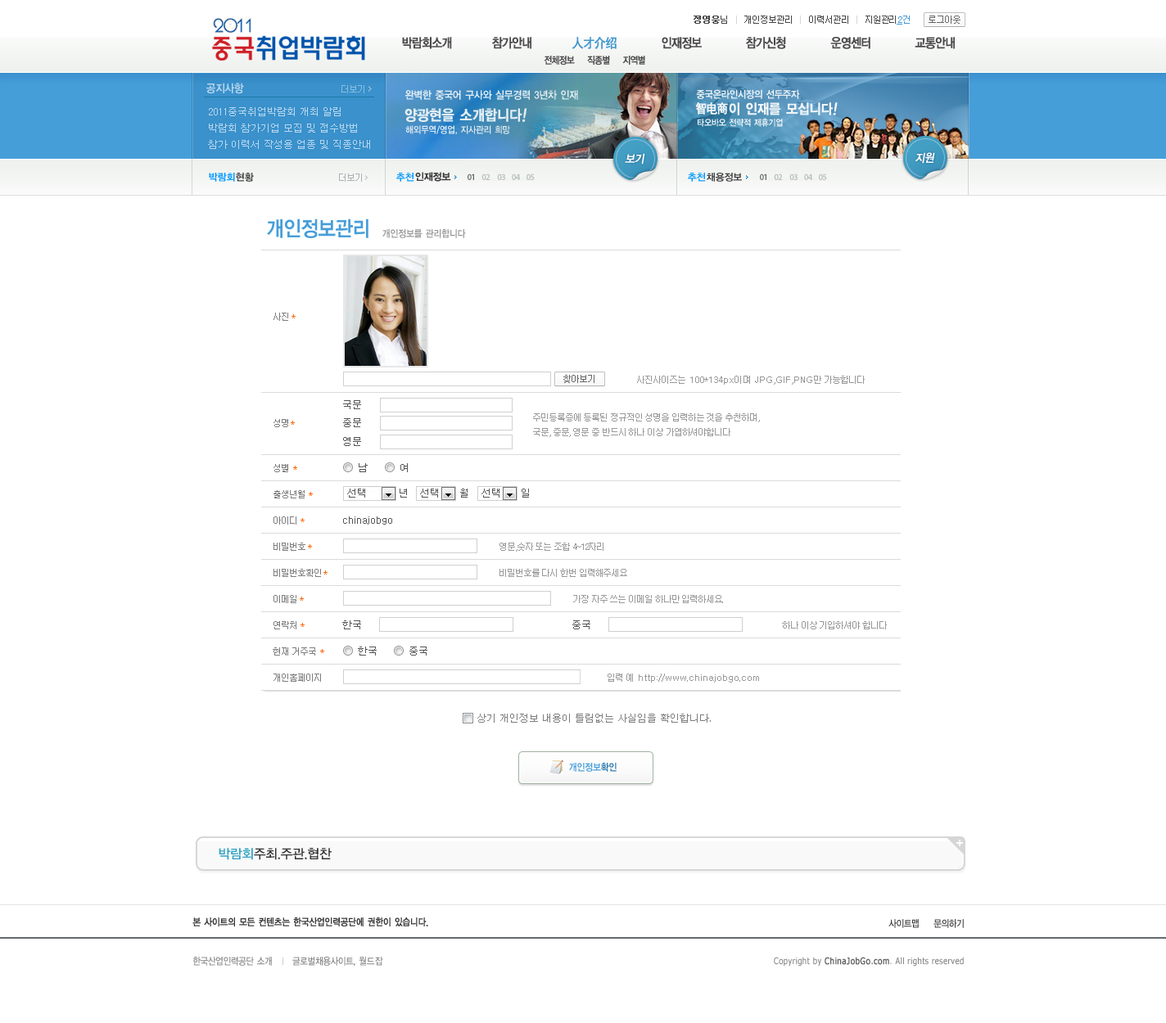
<style>
.page{position:relative;width:1166px;height:1023px;background:#ffffff}
.page>*{position:absolute;margin:0}
.t1{font:9px "Dotum";letter-spacing:-0.1em;color:#464646}
.t2{font:9px "Dotum";letter-spacing:-0.1em;color:#464646;font-weight:bold}
.t3{font:9px "Dotum";letter-spacing:-0.1em;color:#d6d6d6}
.t4{font:9px "Dotum";color:#4298d5;text-decoration:underline}
.t5{font:9px "Dotum";color:#4298d5}
.t6{font:13.1px "YDIYGO130-KSCpc-EUC-H";letter-spacing:-0.14em;color:#4a4a4a;font-weight:bold;scale:0.86 1}
.t7{font:13.1px "SimHei";letter-spacing:-0.08em;color:#3e95cf;font-weight:bold;scale:0.9 1}
.t8{font:9.8px "YDIYGO130-KSCpc-EUC-H";letter-spacing:-0.14em;color:#4a4a4a;font-weight:bold;scale:0.86 1}
.t9{font:11.5px "YDIYGO140-KSCpc-EUC-H";letter-spacing:-0.1em;color:#b9d7ef;scale:0.9 1}
.t10{font:10.2px "YDIYGO140-KSCpc-EUC-H";letter-spacing:-0.1em;color:#f0f5f8;scale:0.9 1}
.t11{font:10.8px "YDIYGO140-KSCpc-EUC-H";letter-spacing:-0.1em;color:#e4eef4;scale:0.9 1}
.t12{font:9.8px/16.4px "Dotum";color:#b9d7ef}
.t13{font:14.8px "YDIYGO140-KSCpc-EUC-H";letter-spacing:-0.1em;color:#e4eef4;font-weight:bold;scale:0.9 1}
.t14{font:14.8px "YDIYGO140-KSCpc-EUC-H";letter-spacing:-0.1em;color:#e4eef4;font-weight:bold;font-style:italic;scale:0.9 1}
.t15{font:12.7px "SimHei";letter-spacing:-0.1em;color:#f0f5f8;font-weight:bold;scale:0.9 1}
.t16{font:14px "YDIYGO140-KSCpc-EUC-H";letter-spacing:-0.1em;color:#f0f5f8;font-weight:bold;scale:0.9 1}
.t17{font:14px "YDIYGO140-KSCpc-EUC-H";letter-spacing:-0.1em;color:#f0f5f8;font-weight:bold;font-style:italic;scale:0.9 1}
.t18{font:9.4px "YDIYGO140-KSCpc-EUC-H";letter-spacing:-0.1em;color:#dde8ef;scale:0.9 1}
.t19{font:8.9px "YDIYGO140-KSCpc-EUC-H";letter-spacing:-0.1em;color:#f0f5f8;scale:0.9 1}
.t20{font:11.5px "YDIYGO130-KSCpc-EUC-H";letter-spacing:-0.1em;color:#ffffff;font-weight:bold;font-style:italic;scale:0.9 1}
.t21{font:9.8px "YDIYGO140-KSCpc-EUC-H";letter-spacing:-0.1em;color:#0099ff}
.t22{font:9.8px "YDIYGO140-KSCpc-EUC-H";letter-spacing:-0.1em;color:#3e3e3e}
.t23{font:21.3px "YDIYGO140-KSCpc-EUC-H";letter-spacing:-0.1em;color:#469ed9;scale:0.9 1}
.t24{font:9.8px "YDIYGO140-KSCpc-EUC-H";letter-spacing:-0.1em;color:#999999;scale:0.9 1}
.t25{font:9px "Dotum";letter-spacing:-0.1em;color:#7d7d7d}
.t26{font:9px "Dotum";letter-spacing:-0.1em;color:#ff6600}
.t27{font:9px "Dotum";color:#999999}
.t28{font:9px "Dotum";letter-spacing:-0.1em;color:#999999}
.t29{font:9.8px "Dotum";color:#555555}
.t30{font:9px/14.7px "Dotum";letter-spacing:-0.1em;color:#999999}
.t31{font:9.8px "Dotum";color:#7d7d7d}
.t32{font:9.8px "YDIYGO140-KSCpc-EUC-H";letter-spacing:-0.1em;color:#469ed9;scale:0.9 1}
.t33{font:9.8px "YDIYGO140-KSCpc-EUC-H";letter-spacing:-0.1em;color:#2677ae;scale:0.9 1}
.t34{font:13.1px "YDIYGO130-KSCpc-EUC-H";letter-spacing:-0.1em;color:#323131}
.t35{font:13.1px "YDIYGO130-KSCpc-EUC-H";letter-spacing:-0.1em;color:#2ea2c2}
.t36{font:9.8px "YDIYGO130-KSCpc-EUC-H";letter-spacing:-0.1em;color:#373737;font-weight:bold;scale:0.86 1}
.t37{font:9.8px "YDIYGO130-KSCpc-EUC-H";letter-spacing:-0.1em;color:#373737;scale:0.86 1}
.t38{font:9.8px "YDIYGO130-KSCpc-EUC-H";letter-spacing:-0.1em;color:#868686;scale:0.86 1}
.t39{font:9.8px "YDIYGO130-KSCpc-EUC-H";letter-spacing:-0.05em;color:#868686;scale:0.86 1}
.t40{font:9px "Tahoma";letter-spacing:0.05em;color:#868686;scale:0.86 1}
.t41{font:9px "Tahoma";letter-spacing:0.05em;color:#626262;font-weight:bold;scale:0.86 1}
</style>
<div class="page">
<p class="t1" style="left:693px;top:16px;width:267px;height:8px"><span class="t2">정영웅</span>님   <span class="t3">| </span>  개인정보관리   <span class="t3">| </span>  이력서관리   <span class="t3">|</span>   지원관리             로그아웃</p>
<p class="t4" style="left:896px;top:16px;width:13px;height:9px">2<span class="t5">건</span></p>
<p class="t6" style="left:402px;top:37px;width:50px;height:12px">박람회소개</p>
<p class="t6" style="left:492px;top:37px;width:39px;height:12px">참가안내</p>
<p class="t7" style="left:571px;top:37px;width:45px;height:12px">人才介绍</p>
<p class="t6" style="left:661px;top:37px;width:40px;height:12px">인재정보</p>
<p class="t6" style="left:746px;top:37px;width:40px;height:12px">참가신청</p>
<p class="t6" style="left:830px;top:37px;width:40px;height:12px">운영센터</p>
<p class="t6" style="left:914px;top:37px;width:40px;height:12px">교통안내</p>
<p class="t8" style="left:543px;top:56px;width:102px;height:9px">전체정보    직종별    지역별</p>
<p class="t9" style="left:206px;top:83px;width:38px;height:11px">공지사항</p>
<p class="t10" style="left:696px;top:89px;width:104px;height:10px">중국온라인시장의 선두주자</p>
<p class="t11" style="left:405px;top:90px;width:173px;height:10px">완벽한 중국어 구사와 실무경력 3년차 인재</p>
<p class="t12" style="left:208px;top:107px;width:162px;height:42px">2011중국취업박람회 개최 알림<br>박람회 참가기업 모집 및 접수방법<br>참가 이력서 작성용 업종 및 직종안내</p>
<p class="t13" style="left:404px;top:108px;width:123px;height:14px">양광현을 소개합니다<span class="t14">!</span></p>
<p class="t15" style="left:696px;top:102px;width:32px;height:13px">智电商</p>
<p class="t16" style="left:728px;top:102px;width:109px;height:13px">이 인재를 모십니다<span class="t17">!</span></p>
<p class="t18" style="left:405px;top:125px;width:105px;height:10px">해외무역/영업, 지사관리 희망</p>
<p class="t19" style="left:697px;top:118px;width:85px;height:9px">타오바오 전략적 제휴기업</p>
<p class="t20" style="left:624px;top:153px;width:21px;height:12px">보기</p>
<p class="t20" style="left:915px;top:152px;width:20px;height:12px">지원</p>
<p class="t21" style="left:209px;top:173px;width:26px;height:9px">박람회</p>
<p class="t22" style="left:236px;top:173px;width:18px;height:9px">현황</p>
<p class="t21" style="left:396px;top:173px;width:18px;height:9px">추천</p>
<p class="t22" style="left:415px;top:172px;width:36px;height:10px">인재정보</p>
<p class="t21" style="left:688px;top:173px;width:18px;height:9px">추천</p>
<p class="t22" style="left:706px;top:173px;width:36px;height:9px">채용정보</p>
<p class="t23" style="left:267px;top:219px;width:101px;height:19px">개인정보관리</p>
<p class="t24" style="left:382px;top:229px;width:84px;height:9px">개인정보를 관리합니다</p>
<p class="t25" style="left:273px;top:313px;width:15px;height:8px">사진</p>
<p class="t26" style="left:291px;top:314px;width:4px;height:4px">*</p>
<p class="t27" style="left:637px;top:376px;width:227px;height:9px"><span class="t28">사진사이즈는  </span>100*134px이며 JPG,GIF,PNG<span class="t28">만 가능합니다</span></p>
<p class="t29" style="left:343px;top:400px;width:18px;height:9px">국문</p>
<p class="t30" style="left:533px;top:413px;width:227px;height:24px">주민등록증에 등록된 정규적인 성명을 입력하는 것을 추천하며,<br>국문, 중문, 영문 중 반드시 하나 이상 가엽하셔야합니다</p>
<p class="t25" style="left:273px;top:419px;width:15px;height:8px">성명</p>
<p class="t26" style="left:291px;top:421px;width:4px;height:4px">*</p>
<p class="t29" style="left:343px;top:418px;width:18px;height:9px">중문</p>
<p class="t29" style="left:343px;top:437px;width:18px;height:9px">영문</p>
<p class="t25" style="left:273px;top:464px;width:15px;height:8px">성별</p>
<p class="t26" style="left:293px;top:466px;width:4px;height:4px">*</p>
<p class="t29" style="left:358px;top:463px;width:9px;height:9px">남</p>
<p class="t29" style="left:400px;top:463px;width:8px;height:9px">여</p>
<p class="t25" style="left:273px;top:490px;width:31px;height:8px">출생년월</p>
<p class="t26" style="left:309px;top:492px;width:4px;height:4px">*</p>
<p class="t29" style="left:347px;top:489px;width:18px;height:9px">선택</p>
<p class="t29" style="left:399px;top:489px;width:8px;height:9px">년</p>
<p class="t29" style="left:420px;top:489px;width:18px;height:9px">선택</p>
<p class="t29" style="left:460px;top:489px;width:7px;height:9px">월</p>
<p class="t29" style="left:481px;top:489px;width:18px;height:9px">선택</p>
<p class="t29" style="left:521px;top:489px;width:8px;height:9px">일</p>
<p class="t25" style="left:273px;top:516px;width:23px;height:9px">아이디</p>
<p class="t26" style="left:300px;top:518px;width:4px;height:4px">*</p>
<p class="t29" style="left:343px;top:516px;width:49px;height:9px">chinajobgo</p>
<p class="t25" style="left:273px;top:543px;width:32px;height:8px">비밀번호</p>
<p class="t26" style="left:308px;top:544px;width:4px;height:4px">*</p>
<p class="t28" style="left:499px;top:543px;width:104px;height:9px">영문,숫자 또는 조합 4~12자리</p>
<p class="t25" style="left:273px;top:569px;width:48px;height:8px">비밀번호확인</p>
<p class="t28" style="left:499px;top:569px;width:128px;height:8px">비밀번호를 다시 한번 입력해주세요</p>
<p class="t26" style="left:323px;top:570px;width:4px;height:5px">*</p>
<p class="t25" style="left:273px;top:595px;width:23px;height:8px">이메일</p>
<p class="t26" style="left:300px;top:597px;width:4px;height:4px">*</p>
<p class="t28" style="left:573px;top:595px;width:150px;height:8px">가장 자주 쓰는 이메일 하나만 입력하세요.</p>
<p class="t25" style="left:273px;top:621px;width:23px;height:8px">연락처</p>
<p class="t26" style="left:300px;top:623px;width:4px;height:4px">*</p>
<p class="t29" style="left:342px;top:620px;width:19px;height:9px">한국</p>
<p class="t29" style="left:572px;top:620px;width:18px;height:9px">중국</p>
<p class="t28" style="left:782px;top:621px;width:104px;height:8px">하나 이상 기입하셔야 합니다</p>
<p class="t25" style="left:273px;top:647px;width:43px;height:9px">현재 거주국</p>
<p class="t26" style="left:320px;top:649px;width:4px;height:4px">*</p>
<p class="t29" style="left:358px;top:647px;width:18px;height:9px">한국</p>
<p class="t29" style="left:409px;top:647px;width:18px;height:9px">중국</p>
<p class="t25" style="left:273px;top:674px;width:48px;height:8px">개인홈페이지</p>
<p class="t27" style="left:607px;top:674px;width:152px;height:9px"><span class="t28">입력 예  </span>http://www.chinajobgo.com</p>
<p class="t31" style="left:477px;top:714px;width:233px;height:9px">상기 개인정보 내용이 틀림없는 사실임을 확인합니다.</p>
<p class="t32" style="left:569px;top:763px;width:47px;height:9px">개인정보<span class="t33">확인</span></p>
<p class="t34" style="left:219px;top:848px;width:112px;height:12px"><span class="t35">박람회</span>주최.주관.협찬</p>
<p class="t36" style="left:192px;top:918px;width:236px;height:9px">본 사이트의 모든 컨텐츠는 한국산업인력공단에 권한이 있습니다.</p>
<p class="t37" style="left:888px;top:919px;width:30px;height:9px">사이트맵</p>
<p class="t37" style="left:933px;top:919px;width:30px;height:9px">문의하기</p>
<p class="t38" style="left:193px;top:957px;width:190px;height:10px">한국산업인력공단 소개      글로벌채용사이트, <span class="t39">월드잡</span></p>
<p class="t40" style="left:773px;top:957px;width:190px;height:10px">Copyright by <span class="t41">ChinaJobGo.com</span>. All rights reserved</p>
</div>
